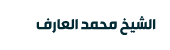
<style>
.page{position:relative;width:170px;height:50px;background:#ffffff}
.page>*{position:absolute;margin:0}
.t1{font:16.6px "STV-Bold";color:#012934}
</style>
<div class="page">
<p class="t1" style="left:36px;top:16px;width:120px;height:19px">الشيخ محمد العارف</p>
</div>
